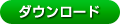
<style>
.page{position:relative;width:120px;height:24px}
.page>*{position:absolute;margin:0}
.t1{font:14px "PS-NOW-GE-83pv-RKSJ-H";letter-spacing:-0.025em;color:#ffffff}
</style>
<div class="page">
<p class="t1" style="left:19px;top:5px;width:80px;height:13px">ダウンロード</p>
</div>
